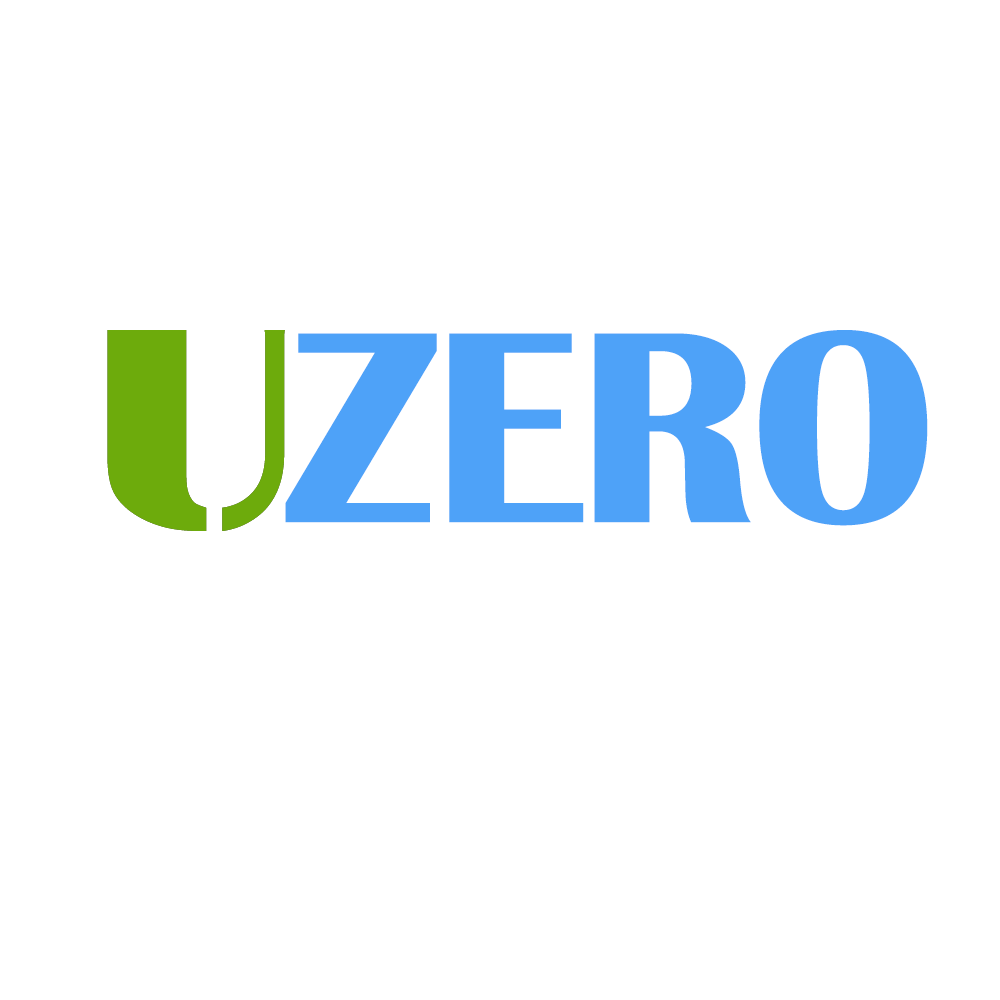
<style>
.page{position:relative;width:1000px;height:1000px;background:#ffffff}
.page>*{position:absolute;margin:0}
.t1{font:283px "BritannicBold";letter-spacing:-0.02em;color:#4ea2f8}
</style>
<div class="page">
<p class="t1" style="left:285px;top:330px;width:643px;height:196px">ZERO</p>
</div>
